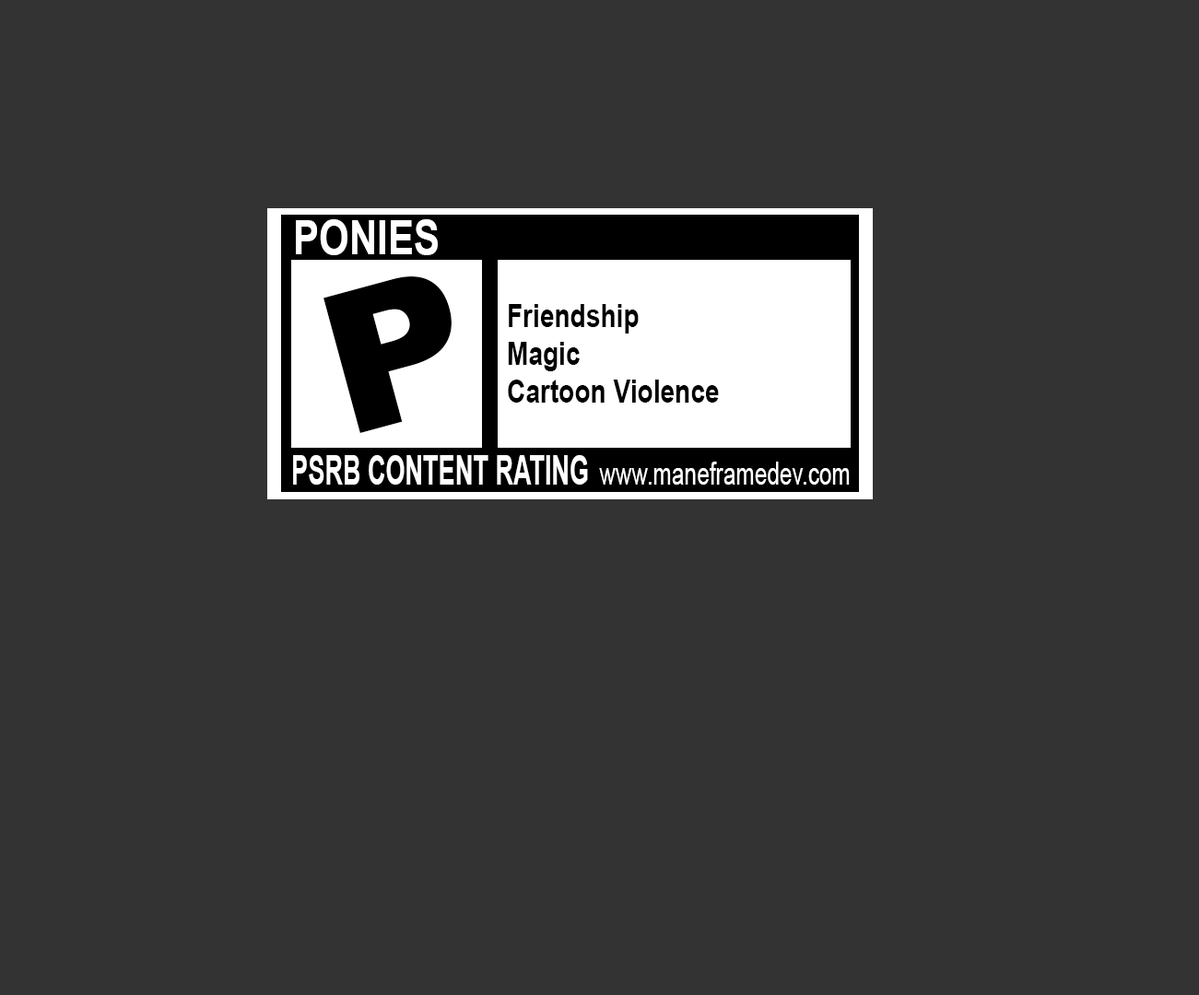
<style>
.page{position:relative;width:1199px;height:995px;background:#333333}
.page>*{position:absolute;margin:0}
.t1{font:46.8px "Arial-BoldMT";color:#ffffff;scale:0.83 1}
.t2{font:195.4px "Arial-Black";color:#000000}
.t3{font:31.6px "Arial-BoldMT";color:#000000;scale:0.82 1}
.t4{font:41.2px "Arial-BoldMT";color:#ffffff;scale:0.61 1}
.t5{font:32.6px "ArialMT";color:#ffffff;scale:0.69 1}
</style>
<div class="page">
<p class="t1" style="left:296px;top:219px;width:142px;height:36px">PONIES</p>
<p class="t2" style="left:323px;top:276px;width:128px;height:157px;rotate:-15deg">P</p>
<p class="t3" style="left:508px;top:304px;width:211px;height:99px">Friendship<br>Magic<br>Cartoon Violence</p>
<p class="t4" style="left:293px;top:455px;width:295px;height:30px">PSRB CONTENT RATING</p>
<p class="t5" style="left:599px;top:462px;width:250px;height:23px">www.maneframedev.com</p>
</div>
